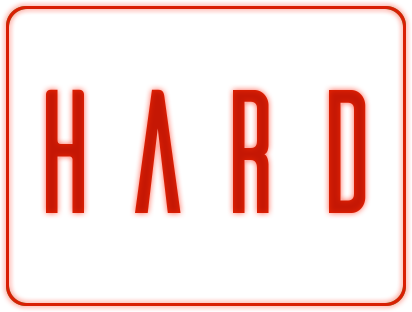
<style>
.page{position:relative;width:412px;height:312px;background:#ffffff}
.page>*{position:absolute;margin:0}
.t1{font:176px "Ailerons-Regular";color:#c51704;scale:0.91 1}
</style>
<div class="page">
<p class="t1" style="left:46px;top:89px;width:320px;height:124px">hard</p>
</div>
